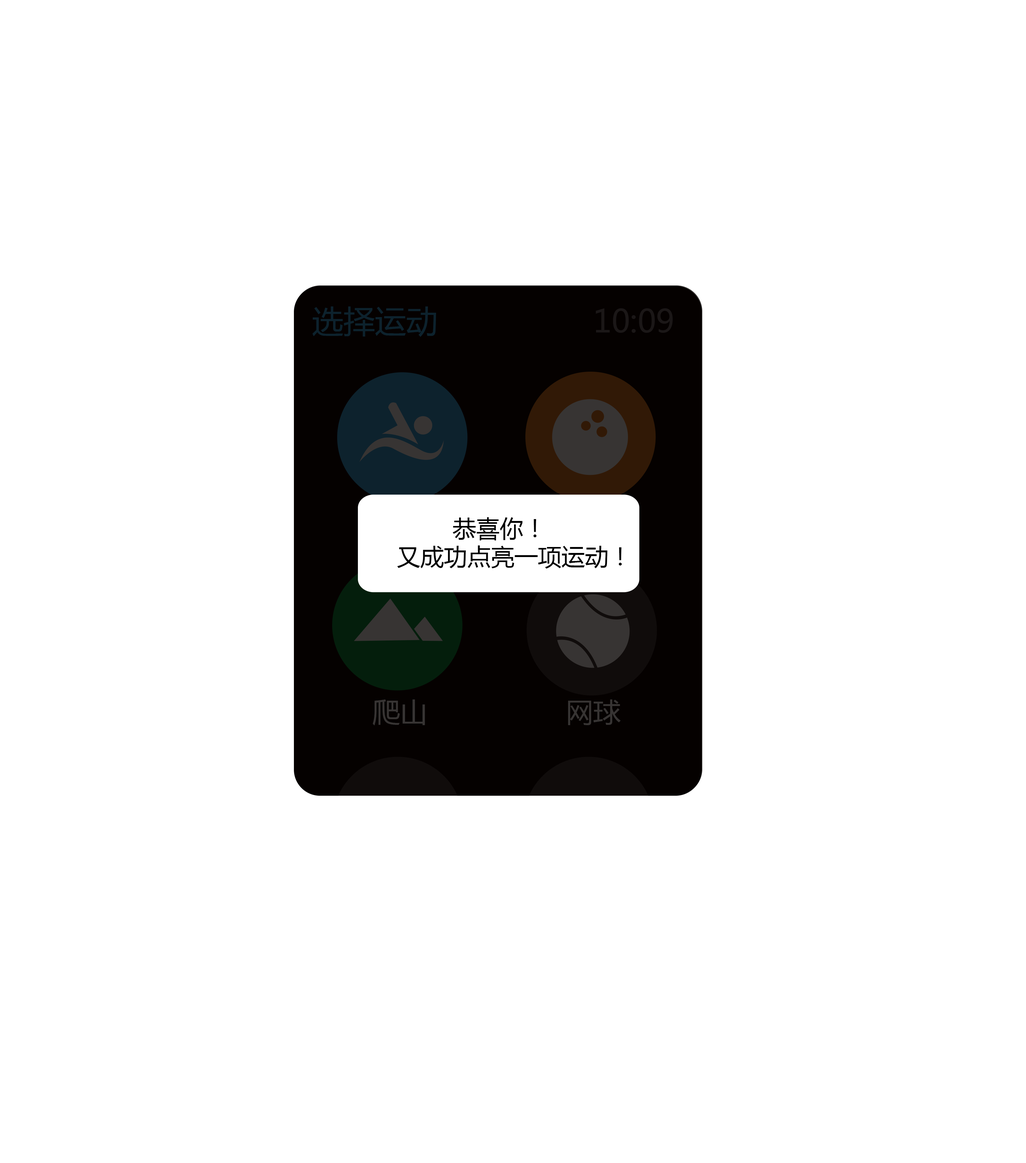
<style>
.page{position:relative;width:1026px;height:1163px;background:#ffffff}
.page>*{position:absolute;margin:0}
.t1{font:31.4px "MicrosoftYaHei";color:#0d222d}
.t2{font:31.4px "MicrosoftYaHei";color:#1b1717}
.t3{font:23.5px "MicrosoftYaHei";color:#000000}
.t4{font:27.4px "MicrosoftYaHei";color:#373433}
</style>
<div class="page">
<p class="t1" style="left:312px;top:306px;width:124px;height:31px">选择运动</p>
<p class="t2" style="left:595px;top:308px;width:78px;height:25px">10:09</p>
<p class="t3" style="left:397px;top:517px;width:225px;height:51px">恭喜你！<br>   又成功点亮一项运动！</p>
<p class="t4" style="left:372px;top:699px;width:53px;height:26px">爬山</p>
<p class="t4" style="left:568px;top:699px;width:53px;height:26px">网球</p>
</div>
